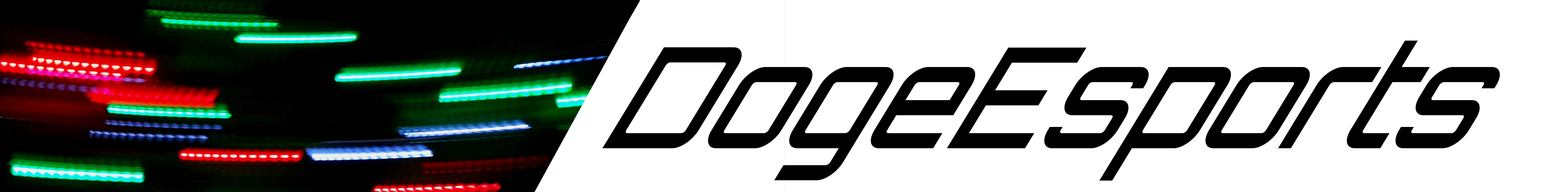
<style>
.page{position:relative;width:1568px;height:192px;background:#ffffff}
.page>*{position:absolute;margin:0}
.t1{font:163.9px "Orbitron-Medium";letter-spacing:0.005em;color:#000000;scale:0.72 1}
</style>
<div class="page">
<p class="t1" style="left:602px;top:41px;width:898px;height:140px">DogeEsports</p>
</div>
